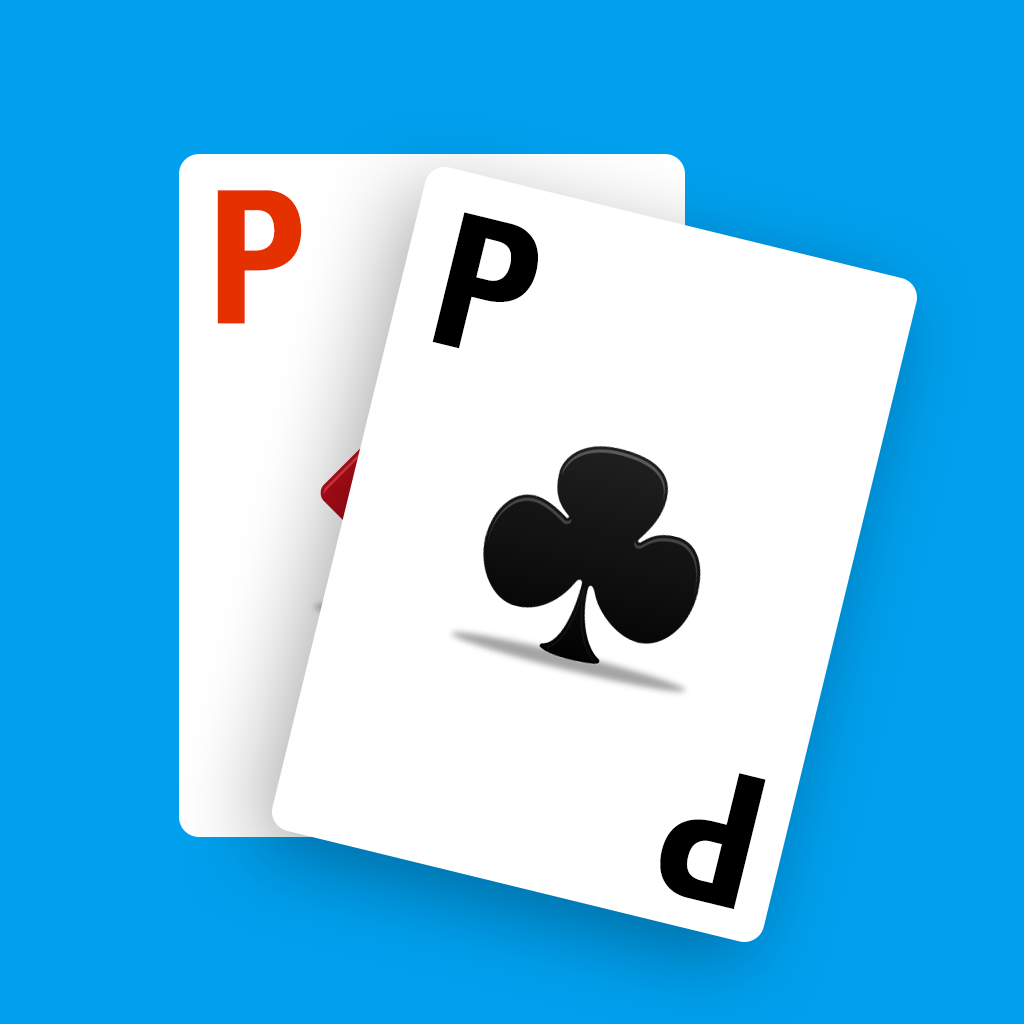
<style>
.page{position:relative;width:1024px;height:1024px;background:#00a0ee}
.page>*{position:absolute;margin:0}
.t1{font:186.3px "HelveticaNeue-CondensedBold";letter-spacing:0.05em;color:#e53000}
.t2{font:186.3px "HelveticaNeue-CondensedBold";letter-spacing:0.05em;color:#000000}
</style>
<div class="page">
<p class="t1" style="left:217px;top:190px;width:85px;height:134px">P</p>
<p class="t2" style="left:432px;top:212px;width:106px;height:137px;rotate:14deg">P</p>
<p class="t2" style="left:660px;top:773px;width:106px;height:136px;rotate:-166deg">P</p>
</div>
